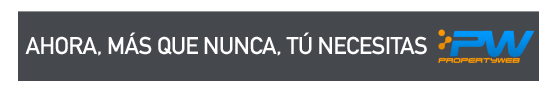
<style>
.page{position:relative;width:555px;height:101px;background:#45484d}
.page>*{position:absolute;margin:0}
.t1{font:24px "DINMittelschriftStd";letter-spacing:-0.025em;color:#ffffff}
</style>
<div class="page">
<p class="t1" style="left:25px;top:32px;width:402px;height:24px">AHORA, MÁS QUE NUNCA, TÚ NECESITAS</p>
</div>
